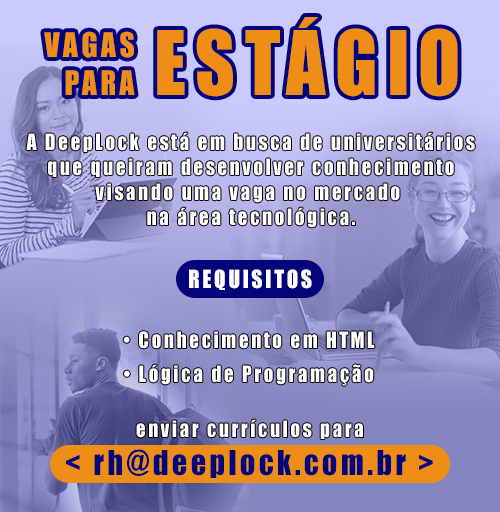
<style>
.page{position:relative;width:500px;height:512px}
.page>*{position:absolute;margin:0}
.t1{font:82.2px "Impact";letter-spacing:0.12em;color:#ef8e16;scale:0.94 1}
.t2{font:31.2px "Impact";letter-spacing:0.12em;color:#ef8e16;scale:0.94 1}
.t3{font:20.9px "Impact";letter-spacing:0.12em;color:#ffffff;scale:0.94 1}
.t4{font:23px "Impact";letter-spacing:0.12em;color:#ffffff;scale:0.94 1}
.t5{font:20.9px/34.3px "Impact";letter-spacing:0.12em;color:#ffffff;scale:0.94 1}
.t6{font:20.8px "Impact";letter-spacing:0.12em;color:#ffffff;scale:0.94 1}
.t7{font:31.6px "Impact";letter-spacing:0.12em;color:#05057b;scale:0.94 1}
</style>
<div class="page">
<p class="t1" style="left:157px;top:17px;width:301px;height:80px">ESTÁGIO</p>
<p class="t2" style="left:44px;top:31px;width:91px;height:64px;text-align:right">VAGAS<br>PARA</p>
<p class="t3" style="left:26px;top:132px;width:449px;height:96px;text-align:center">A DeepLock está em busca de universitários<br>que queiram desenvolver conhecimento<br>visando uma vaga no mercado <br>na área tecnológica.</p>
<p class="t4" style="left:189px;top:269px;width:123px;height:21px">REQUISITOS</p>
<p class="t5" style="left:123px;top:331px;width:252px;height:55px;text-align:center">• Conhecimento em HTML<br>• Lógica de Programação</p>
<p class="t6" style="left:136px;top:419px;width:227px;height:20px">enviar currículos para</p>
<p class="t7" style="left:66px;top:449px;width:367px;height:29px">&lt; rh@deeplock.com.br &gt;</p>
</div>
